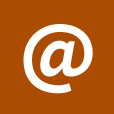
<style>
.page{position:relative;width:114px;height:114px;background:#ab4c00}
.page>*{position:absolute;margin:0}
.t1{font:75.8px "PTSans-Bold";color:#ffffff}
</style>
<div class="page">
<p class="t1" style="left:23px;top:24px;width:70px;height:70px">@</p>
</div>
